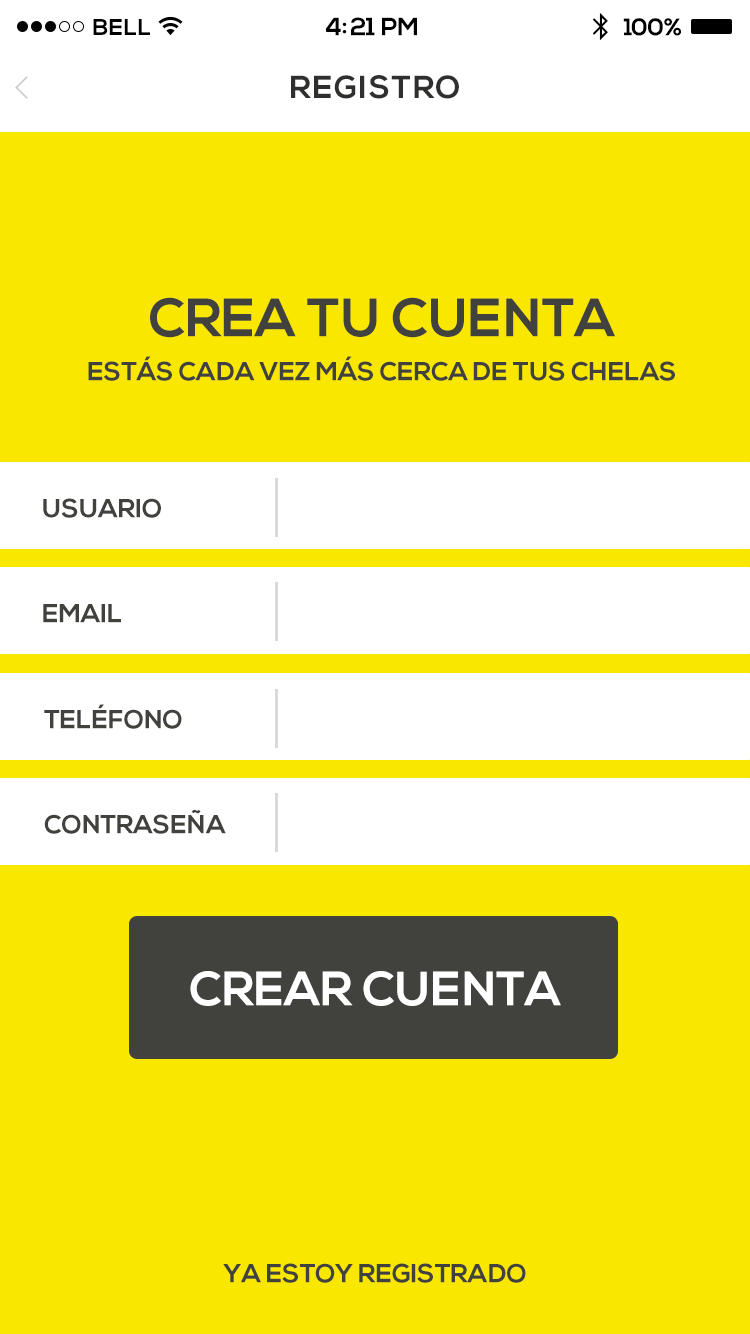
<style>
.page{position:relative;width:750px;height:1334px;background:#fae700}
.page>*{position:absolute;margin:0}
.t1{font:25px "NexaBold";letter-spacing:-0.02em;color:#000000}
.t2{font:23px "NexaBold";letter-spacing:0.02em;color:#000000}
.t3{font:24px "NexaBold";letter-spacing:-0.02em;color:#000000}
.t4{font:31.7px "NexaBold";letter-spacing:0.05em;color:#2f2f2d}
.t5{font:54px "NexaBold";color:#41413e}
.t6{font:26px "NexaBold";color:#41413e}
.t7{font:48px "NexaBold";color:#ffffff}
</style>
<div class="page">
<p class="t1" style="left:325px;top:17px;width:92px;height:19px">4:21 PM</p>
<p class="t2" style="left:93px;top:19px;width:57px;height:16px">BELL</p>
<p class="t3" style="left:623px;top:18px;width:58px;height:18px">100%</p>
<p class="t4" style="left:291px;top:75px;width:168px;height:24px">REGISTRO</p>
<p class="t5" style="left:150px;top:297px;width:465px;height:41px">CREA TU CUENTA</p>
<p class="t6" style="left:88px;top:356px;width:587px;height:25px">ESTÁS CADA VEZ MÁS CERCA DE TUS CHELAS</p>
<p class="t6" style="left:43px;top:498px;width:118px;height:20px">USUARIO</p>
<p class="t6" style="left:43px;top:604px;width:78px;height:19px">EMAIL</p>
<p class="t6" style="left:44px;top:704px;width:138px;height:25px">TELÉFONO</p>
<p class="t6" style="left:44px;top:809px;width:182px;height:25px">CONTRASEÑA</p>
<p class="t7" style="left:190px;top:971px;width:371px;height:35px">CREAR CUENTA</p>
<p class="t6" style="left:223px;top:1263px;width:303px;height:20px">YA ESTOY REGISTRADO</p>
</div>
